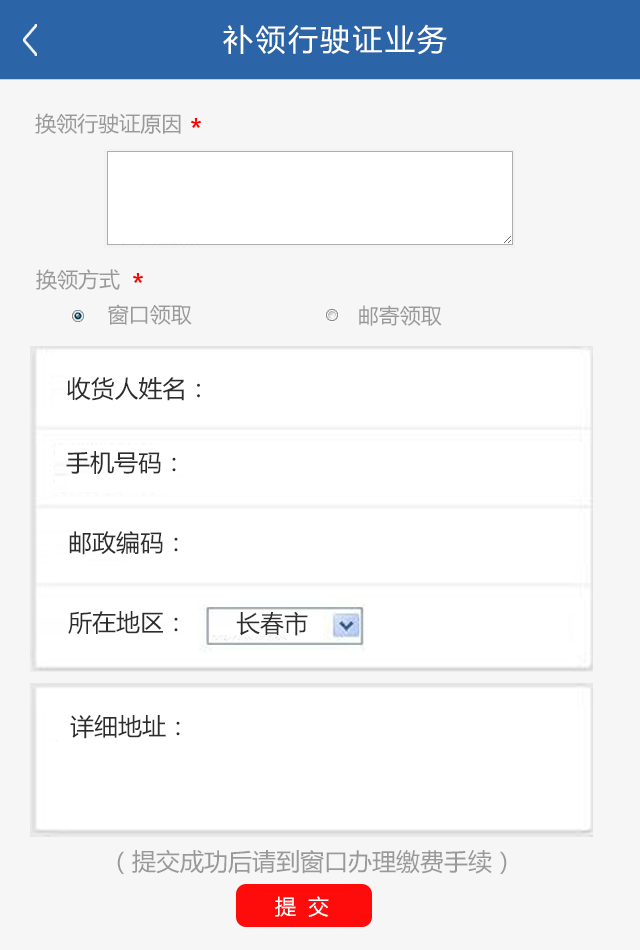
<style>
.page{position:relative;width:640px;height:950px;background:#ffffff}
.page>*{position:absolute;margin:0}
.t1{font:30px "MicrosoftYaHei";letter-spacing:0.08em;color:#ffffff}
.t2{font:21px "MicrosoftYaHei";color:#999999}
.t3{font:24px "MicrosoftYaHei";color:#2e2d2d}
.t4{font:24px "MicrosoftYaHei";color:#999999}
.t5{font:21px "MicrosoftYaHei";letter-spacing:0.14em;color:#ffffff}
</style>
<div class="page">
<p class="t1" style="left:223px;top:24px;width:224px;height:31px">补领行驶证业务</p>
<p class="t2" style="left:35px;top:113px;width:146px;height:21px">换领行驶证原因</p>
<p class="t2" style="left:36px;top:269px;width:84px;height:21px">换领方式</p>
<p class="t2" style="left:108px;top:304px;width:84px;height:21px">窗口领取</p>
<p class="t2" style="left:359px;top:305px;width:83px;height:21px">邮寄领取</p>
<p class="t3" style="left:67px;top:377px;width:133px;height:24px">收货人姓名：</p>
<p class="t3" style="left:66px;top:451px;width:110px;height:24px">手机号码：</p>
<p class="t3" style="left:69px;top:531px;width:109px;height:24px">邮政编码：</p>
<p class="t3" style="left:68px;top:611px;width:110px;height:24px">所在地区：</p>
<p class="t3" style="left:236px;top:611px;width:72px;height:25px">长春市</p>
<p class="t3" style="left:70px;top:714px;width:110px;height:25px">详细地址：</p>
<p class="t4" style="left:117px;top:849px;width:390px;height:25px">（提交成功后请到窗口办理缴费手续）</p>
<p class="t5" style="left:275px;top:896px;width:54px;height:21px">提 交</p>
</div>
